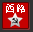
<style>
.page{position:relative;width:33px;height:32px;background:#c50000}
.page>*{position:absolute;margin:0}
.t1{font:10.4px "SimSun";color:#ffffff}
</style>
<div class="page">
<p class="t1" style="left:6px;top:4px;width:19px;height:9px">西路</p>
</div>
